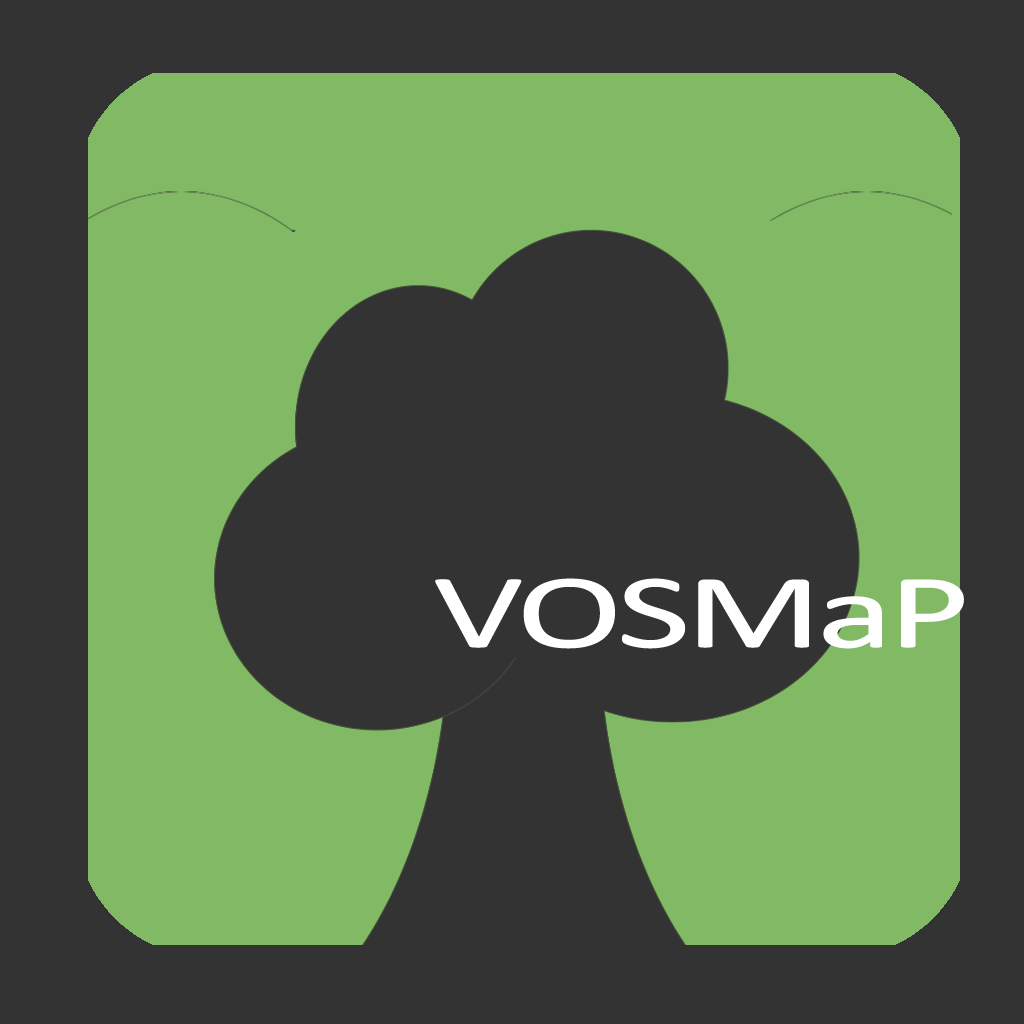
<style>
.page{position:relative;width:1024px;height:1024px;background:#333333}
.page>*{position:absolute;margin:0}
.t1{font:106px "Calibri";letter-spacing:-0.06em;color:#ffffff;font-weight:bold;scale:1.51 1}
</style>
<div class="page">
<p class="t1" style="left:435px;top:578px;width:529px;height:71px">VOSMaP</p>
</div>
